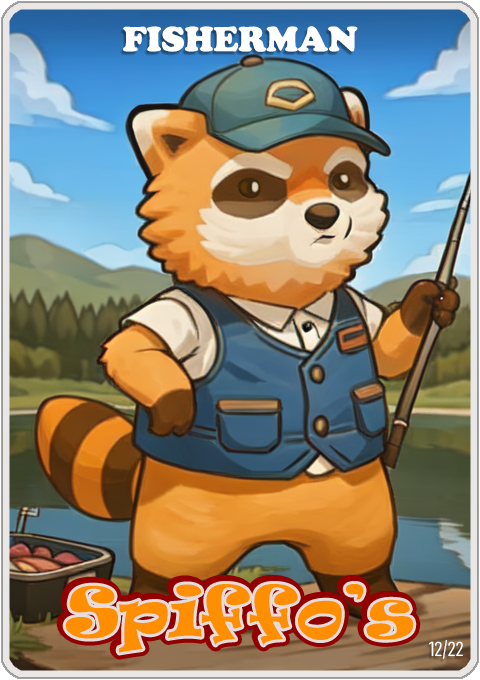
<style>
.page{position:relative;width:480px;height:680px}
.page>*{position:absolute;margin:0}
.t1{font:36px "CooperBlack";color:#ffffff}
.t2{font:65px "Ravie";color:#ff8e00}
.t3{font:20px "Bahnschrift-LightCondensed";color:#ffffff}
</style>
<div class="page">
<p class="t1" style="left:123px;top:26px;width:235px;height:26px">FISHERMAN</p>
<p class="t2" style="left:65px;top:584px;width:349px;height:69px">Spiffo’s</p>
<p class="t3" style="left:429px;top:640px;width:34px;height:19px">12/22</p>
</div>
